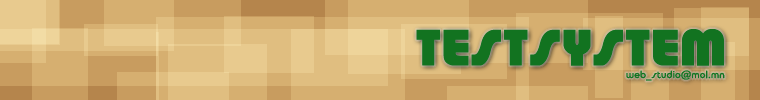
<style>
.page{position:relative;width:760px;height:100px;background:#d6af70}
.page>*{position:absolute;margin:0}
.t1{font:48px "TaurusHeavy-Mon";color:#127320;font-weight:bold}
.t2{font:10px "Taurus-Mon";color:#127320;font-weight:bold}
</style>
<div class="page">
<p class="t1" style="left:416px;top:29px;width:308px;height:37px">TESTSYSTEM</p>
<p class="t2" style="left:626px;top:70px;width:99px;height:11px">web_studio@mol.mn</p>
</div>
